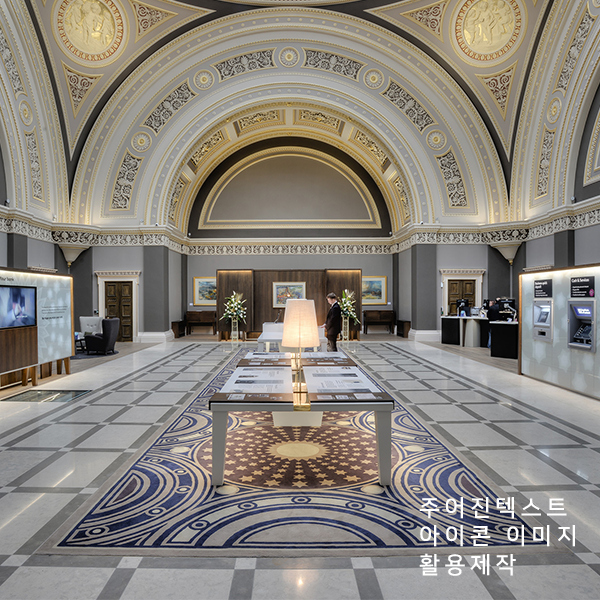
<style>
.page{position:relative;width:600px;height:600px}
.page>*{position:absolute;margin:0}
.t1{font:23px/28.7px "NanumSquareB";letter-spacing:0.2em;color:#ffffff}
</style>
<div class="page">
<p class="t1" style="left:419px;top:497px;width:156px;height:79px">주어진텍스트<br>아이콘 이미지<br>활용제작</p>
</div>
